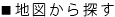
<style>
.page{position:relative;width:115px;height:17px;background:#ffffff}
.page>*{position:absolute;margin:0}
.t1{font:14.3px "KozGoPro-ExtraLight";letter-spacing:0.19em;color:#010101}
.t2{font:10.2px "KozGoPro-ExtraLight";letter-spacing:0.35em;color:#010101}
</style>
<div class="page">
<p class="t1" style="left:1px;top:3px;width:113px;height:14px"><span class="t2">■</span>地図から探す</p>
</div>
